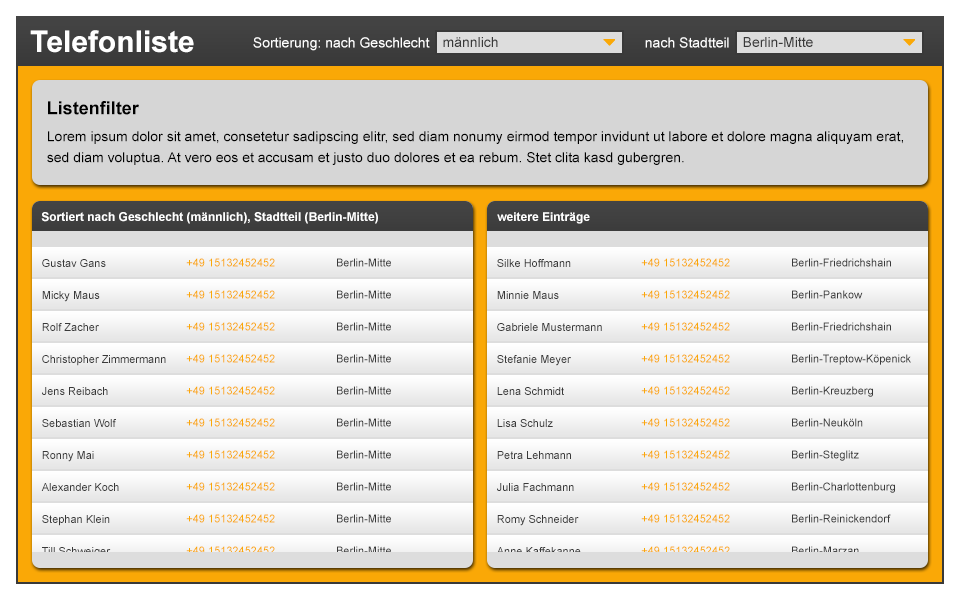
<style>
.page{position:relative;width:960px;height:600px}
.page>*{position:absolute;margin:0}
.t1{font:30px "Arial-BoldMT";color:#ffffff}
.t2{font:14px "ArialMT";color:#ffffff}
.t3{font:14px "ArialMT";color:#393939}
.t4{font:18px "Arial-BoldMT";color:#000000}
.t5{font:14px/21px "ArialMT";color:#000000}
.t6{font:12px "Arial-BoldMT";color:#ffffff}
.t7{font:11px "ArialMT";color:#393939}
.t8{font:11px "ArialMT";color:#faa806}
.t9{font:11px "ArialMT"}
</style>
<div class="page">
<p class="t1" style="left:30px;top:30px;width:164px;height:23px">Telefonliste</p>
<p class="t2" style="left:253px;top:37px;width:177px;height:14px">Sortierung: nach Geschlecht</p>
<p class="t3" style="left:443px;top:37px;width:55px;height:10px">männlich</p>
<p class="t2" style="left:645px;top:37px;width:84px;height:11px">nach Stadtteil</p>
<p class="t3" style="left:743px;top:37px;width:70px;height:10px">Berlin-Mitte</p>
<p class="t4" style="left:48px;top:101px;width:91px;height:14px">Listenfilter</p>
<p class="t5" style="left:47px;top:131px;width:856px;height:34px">Lorem ipsum dolor sit amet, consetetur sadipscing elitr, sed diam nonumy eirmod tempor invidunt ut labore et dolore magna aliquyam erat, sed diam voluptua. At vero eos et accusam et justo duo dolores et ea rebum. Stet clita kasd gubergren.</p>
<p class="t6" style="left:41px;top:212px;width:337px;height:12px">Sortiert nach Geschlecht (männlich), Stadtteil (Berlin-Mitte)</p>
<p class="t6" style="left:497px;top:212px;width:93px;height:12px">weitere Einträge</p>
<p class="t7" style="left:42px;top:259px;width:64px;height:8px">Gustav Gans</p>
<p class="t8" style="left:186px;top:258px;width:89px;height:9px">+49 15132452452</p>
<p class="t7" style="left:337px;top:258px;width:54px;height:9px">Berlin-Mitte</p>
<p class="t7" style="left:497px;top:259px;width:74px;height:8px">Silke Hoffmann</p>
<p class="t8" style="left:641px;top:258px;width:89px;height:9px">+49 15132452452</p>
<p class="t7" style="left:792px;top:258px;width:99px;height:9px">Berlin-Friedrichshain</p>
<p class="t7" style="left:42px;top:291px;width:58px;height:11px">Micky Maus</p>
<p class="t8" style="left:186px;top:290px;width:89px;height:9px">+49 15132452452</p>
<p class="t7" style="left:337px;top:290px;width:54px;height:9px">Berlin-Mitte</p>
<p class="t7" style="left:497px;top:291px;width:62px;height:8px">Minnie Maus</p>
<p class="t8" style="left:641px;top:290px;width:89px;height:9px">+49 15132452452</p>
<p class="t7" style="left:792px;top:290px;width:71px;height:9px">Berlin-Pankow</p>
<p class="t7" style="left:42px;top:323px;width:57px;height:8px">Rolf Zacher</p>
<p class="t8" style="left:186px;top:322px;width:89px;height:9px">+49 15132452452</p>
<p class="t7" style="left:337px;top:322px;width:54px;height:9px">Berlin-Mitte</p>
<p class="t7" style="left:497px;top:323px;width:105px;height:8px">Gabriele Mustermann</p>
<p class="t8" style="left:641px;top:322px;width:89px;height:9px">+49 15132452452</p>
<p class="t7" style="left:792px;top:322px;width:99px;height:9px">Berlin-Friedrichshain</p>
<p class="t7" style="left:42px;top:355px;width:124px;height:11px">Christopher Zimmermann</p>
<p class="t8" style="left:186px;top:354px;width:89px;height:9px">+49 15132452452</p>
<p class="t7" style="left:337px;top:354px;width:54px;height:9px">Berlin-Mitte</p>
<p class="t7" style="left:497px;top:355px;width:74px;height:11px">Stefanie Meyer</p>
<p class="t8" style="left:641px;top:354px;width:89px;height:9px">+49 15132452452</p>
<p class="t7" style="left:792px;top:354px;width:119px;height:11px">Berlin-Treptow-Köpenick</p>
<p class="t7" style="left:42px;top:387px;width:66px;height:8px">Jens Reibach</p>
<p class="t8" style="left:186px;top:386px;width:89px;height:9px">+49 15132452452</p>
<p class="t7" style="left:337px;top:386px;width:54px;height:9px">Berlin-Mitte</p>
<p class="t7" style="left:497px;top:387px;width:67px;height:8px">Lena Schmidt</p>
<p class="t8" style="left:641px;top:386px;width:89px;height:9px">+49 15132452452</p>
<p class="t7" style="left:792px;top:386px;width:81px;height:11px">Berlin-Kreuzberg</p>
<p class="t7" style="left:42px;top:419px;width:74px;height:8px">Sebastian Wolf</p>
<p class="t8" style="left:186px;top:418px;width:89px;height:9px">+49 15132452452</p>
<p class="t7" style="left:337px;top:418px;width:54px;height:9px">Berlin-Mitte</p>
<p class="t7" style="left:497px;top:419px;width:56px;height:8px">Lisa Schulz</p>
<p class="t8" style="left:641px;top:418px;width:89px;height:9px">+49 15132452452</p>
<p class="t7" style="left:792px;top:418px;width:71px;height:9px">Berlin-Neuköln</p>
<p class="t7" style="left:42px;top:451px;width:52px;height:11px">Ronny Mai</p>
<p class="t8" style="left:186px;top:450px;width:89px;height:9px">+49 15132452452</p>
<p class="t7" style="left:337px;top:450px;width:54px;height:9px">Berlin-Mitte</p>
<p class="t7" style="left:497px;top:451px;width:74px;height:8px">Petra Lehmann</p>
<p class="t8" style="left:641px;top:450px;width:89px;height:9px">+49 15132452452</p>
<p class="t7" style="left:792px;top:450px;width:67px;height:11px">Berlin-Steglitz</p>
<p class="t7" style="left:41px;top:483px;width:78px;height:8px">Alexander Koch</p>
<p class="t8" style="left:186px;top:482px;width:89px;height:9px">+49 15132452452</p>
<p class="t7" style="left:337px;top:482px;width:54px;height:9px">Berlin-Mitte</p>
<p class="t7" style="left:497px;top:483px;width:77px;height:8px">Julia Fachmann</p>
<p class="t8" style="left:641px;top:482px;width:89px;height:9px">+49 15132452452</p>
<p class="t7" style="left:792px;top:482px;width:103px;height:11px">Berlin-Charlottenburg</p>
<p class="t7" style="left:42px;top:515px;width:68px;height:11px">Stephan Klein</p>
<p class="t8" style="left:186px;top:514px;width:89px;height:9px">+49 15132452452</p>
<p class="t7" style="left:337px;top:514px;width:54px;height:9px">Berlin-Mitte</p>
<p class="t7" style="left:497px;top:515px;width:82px;height:11px">Romy Schneider</p>
<p class="t8" style="left:641px;top:514px;width:89px;height:9px">+49 15132452452</p>
<p class="t7" style="left:792px;top:514px;width:99px;height:9px">Berlin-Reinickendorf</p>
<p class="t9" style="left:42px;top:547px;width:69px;height:11px">Till Schweiger</p>
<p class="t8" style="left:186px;top:546px;width:89px;height:9px">+49 15132452452</p>
<p class="t7" style="left:337px;top:546px;width:54px;height:9px">Berlin-Mitte</p>
<p class="t9" style="left:496px;top:547px;width:85px;height:8px">Anne Kaffekanne</p>
<p class="t8" style="left:641px;top:546px;width:89px;height:9px">+49 15132452452</p>
<p class="t7" style="left:792px;top:546px;width:67px;height:9px">Berlin-Marzan</p>
</div>
